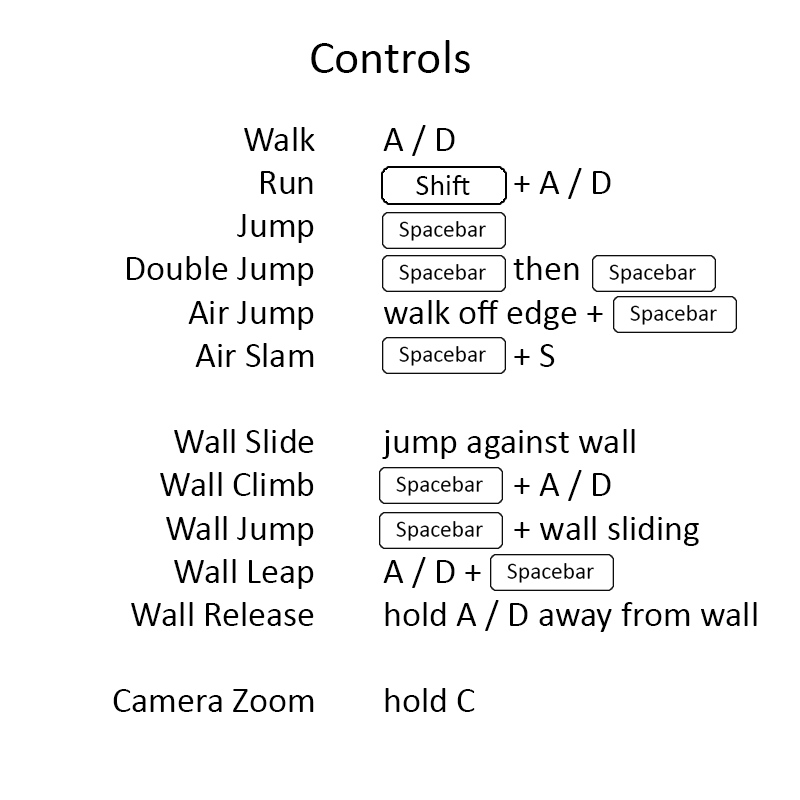
<style>
.page{position:relative;width:800px;height:800px;background:#ffffff}
.page>*{position:absolute;margin:0}
.t1{font:48px "Calibri";color:#000000}
.t2{font:36px "Calibri";color:#000000}
</style>
<div class="page">
<p class="t1" style="left:311px;top:40px;width:159px;height:33px">Controls</p>
<p class="t2" style="left:382px;top:125px;width:375px;height:587px">A / D<br>                + A / D<br><br>                then<br>walk off edge + <br>                + S<br><br>jump against wall<br>                + A / D<br>                + wall sliding<br>A / D +<br>hold A / D away from wall<br><br>hold C</p>
<p class="t2" style="left:113px;top:127px;width:202px;height:585px;text-align:center">Walk<br>Run<br>Jump<br>Double Jump<br>Air Jump<br>Air Slam<br><br>Wall Slide<br>Wall Climb<br>Wall Jump<br>Wall Leap<br>Wall Release<br><br>Camera Zoom</p>
</div>
